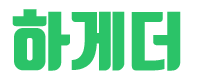
<style>
.page{position:relative;width:200px;height:80px;background:#ffffff}
.page>*{position:absolute;margin:0}
.t1{font:64px "TmonMonsoriBlack";letter-spacing:0.1em;color:#2bc368}
.t2{font:64px "TmonMonsoriBlack";letter-spacing:0.05em;color:#2bc368}
</style>
<div class="page">
<p class="t1" style="left:12px;top:9px;width:169px;height:62px"><span class="t2">하</span>게더</p>
</div>
